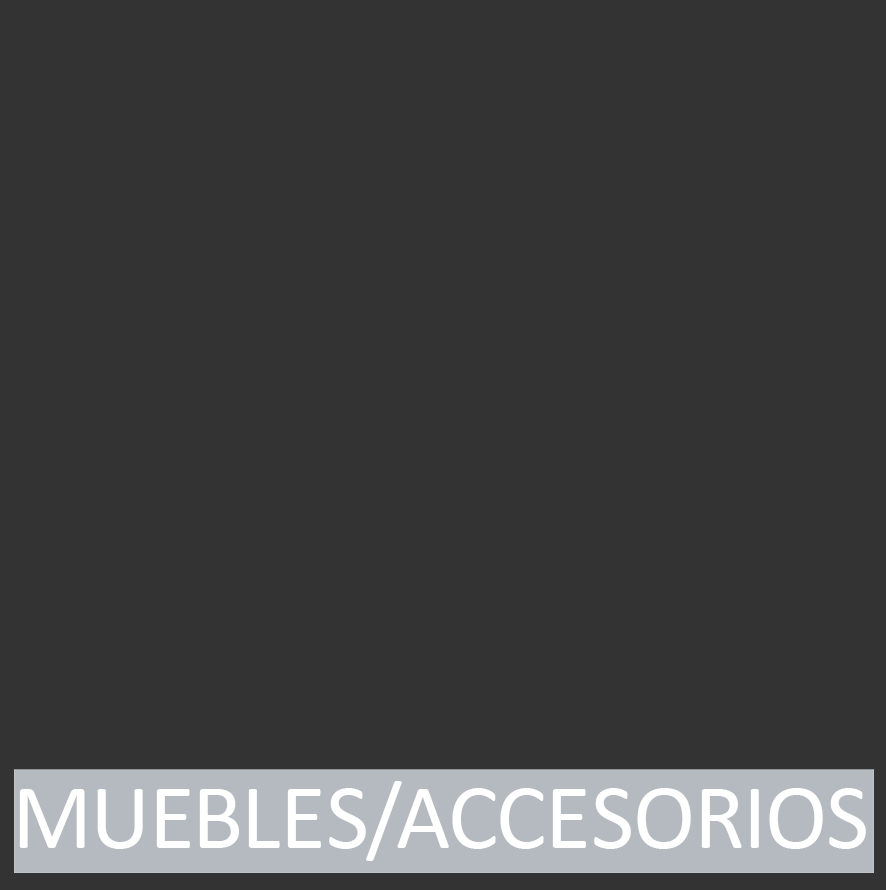
<style>
.page{position:relative;width:886px;height:890px;background:#333333}
.page>*{position:absolute;margin:0}
.t1{font:94.1px "Calibri";letter-spacing:-0.005em;color:#ffffff}
</style>
<div class="page">
<p class="t1" style="left:19px;top:781px;width:847px;height:80px">MUEBLES/ACCESORIOS</p>
</div>
